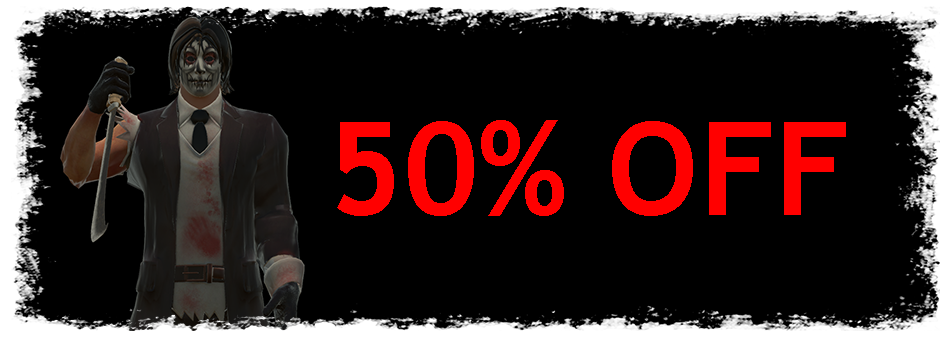
<style>
.page{position:relative;width:951px;height:342px;background:#000000}
.page>*{position:absolute;margin:0}
.t1{font:130px "TrebuchetMS-Bold";color:#ff0000}
</style>
<div class="page">
<p class="t1" style="left:337px;top:120px;width:509px;height:96px">50% OFF</p>
</div>
